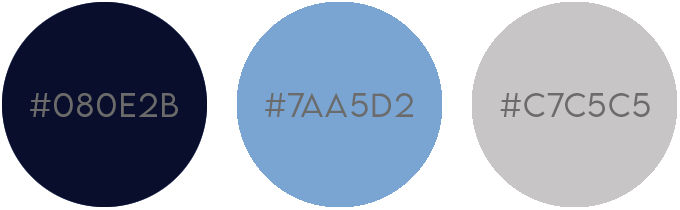
<style>
.page{position:relative;width:680px;height:210px;background:#ffffff}
.page>*{position:absolute;margin:0}
.t1{font:30px "LEMONMILK-Light";letter-spacing:0.05em;color:#6b6b6b}
</style>
<div class="page">
<p class="t1" style="left:30px;top:93px;width:148px;height:24px">#080e2b</p>
<p class="t1" style="left:265px;top:93px;width:148px;height:24px">#7aa5d2</p>
<p class="t1" style="left:500px;top:93px;width:150px;height:24px">#c7c5c5</p>
</div>
